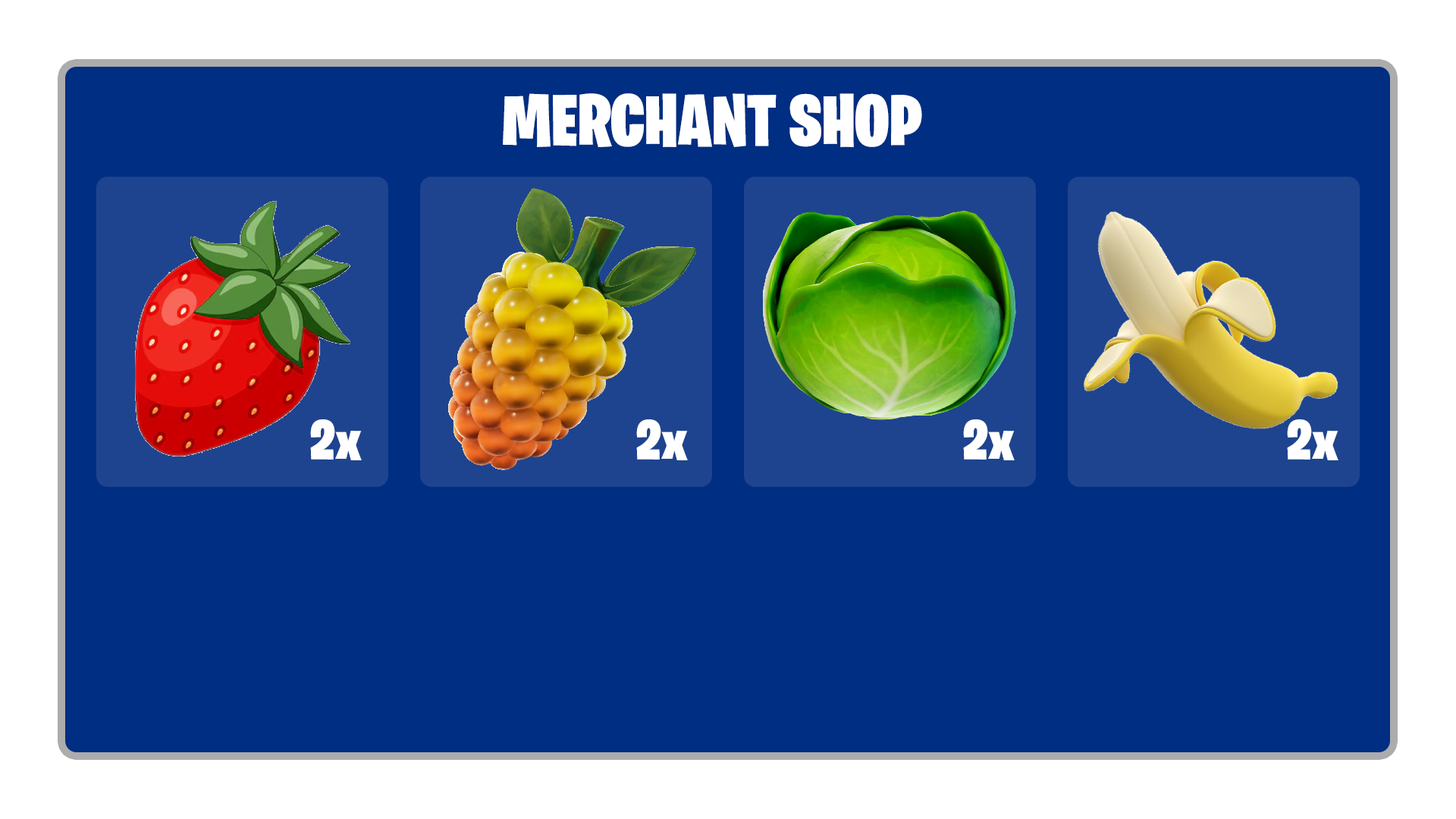
<style>
.page{position:relative;width:1456px;height:819px;background:#002e82}
.page>*{position:absolute;margin:0}
.t1{font:72.8px "BurbankBigCondensed-Black";color:#ffffff}
.t2{font:56.9px "BurbankBigCondensed-Black";color:#ffffff}
</style>
<div class="page">
<p class="t1" style="left:503px;top:93px;width:419px;height:54px">MERCHANT SHOP</p>
<p class="t2" style="left:310px;top:419px;width:52px;height:41px">2x</p>
<p class="t2" style="left:636px;top:419px;width:52px;height:41px">2x</p>
<p class="t2" style="left:963px;top:419px;width:52px;height:41px">2x</p>
<p class="t2" style="left:1287px;top:419px;width:51px;height:41px">2x</p>
</div>
